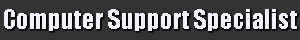
<style>
.page{position:relative;width:300px;height:40px;background:#333333}
.page>*{position:absolute;margin:0}
.t1{font:25px "Impact";color:#f1f1f9}
</style>
<div class="page">
<p class="t1" style="left:4px;top:9px;width:293px;height:22px">Computer Support Specialist</p>
</div>
